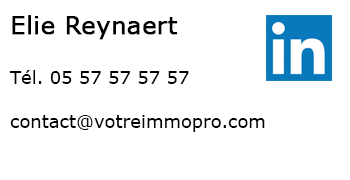
<style>
.page{position:relative;width:350px;height:180px;background:#ffffff}
.page>*{position:absolute;margin:0}
.t1{font:18px "Verdana";color:#000000}
.t2{font:24px "Verdana";color:#000000;font-weight:bold}
</style>
<div class="page">
<p class="t1" style="left:9px;top:15px;width:256px;height:117px"><span class="t2">Elie Reynaert<br><br></span>Tél. 05 57 57 57 57<br><br>contact@votreimmopro.com</p>
</div>
